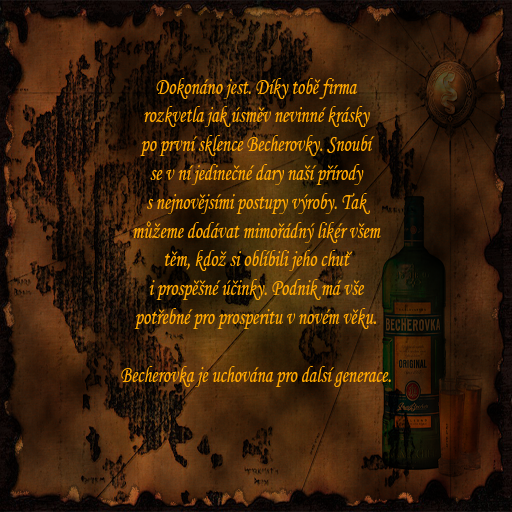
<style>
.page{position:relative;width:512px;height:512px}
.page>*{position:absolute;margin:0}
.t1{font:24px "MtypeCursiveCE";color:#ffa801;scale:0.75 1}
</style>
<div class="page">
<p class="t1" style="left:121px;top:78px;width:270px;height:309px;text-align:center">Dokonáno jest. Díky tobe firma<br>rozkvetla jak úsmev nevinné krásky<br>po první sklence Becherovky. Snoubí<br>se v ní jedinecné dary nasí prírody<br>s nejnovejsími postupy výroby. Tak<br>muzeme dodávat mimorádný likér vsem<br>tem, kdoz si oblíbili jeho chut<br>i prospesné úcinky. Podnik má vse<br>potrebné pro prosperitu v novém veku.<br><br>Becherovka je uchována pro dalsí generace.</p>
</div>
